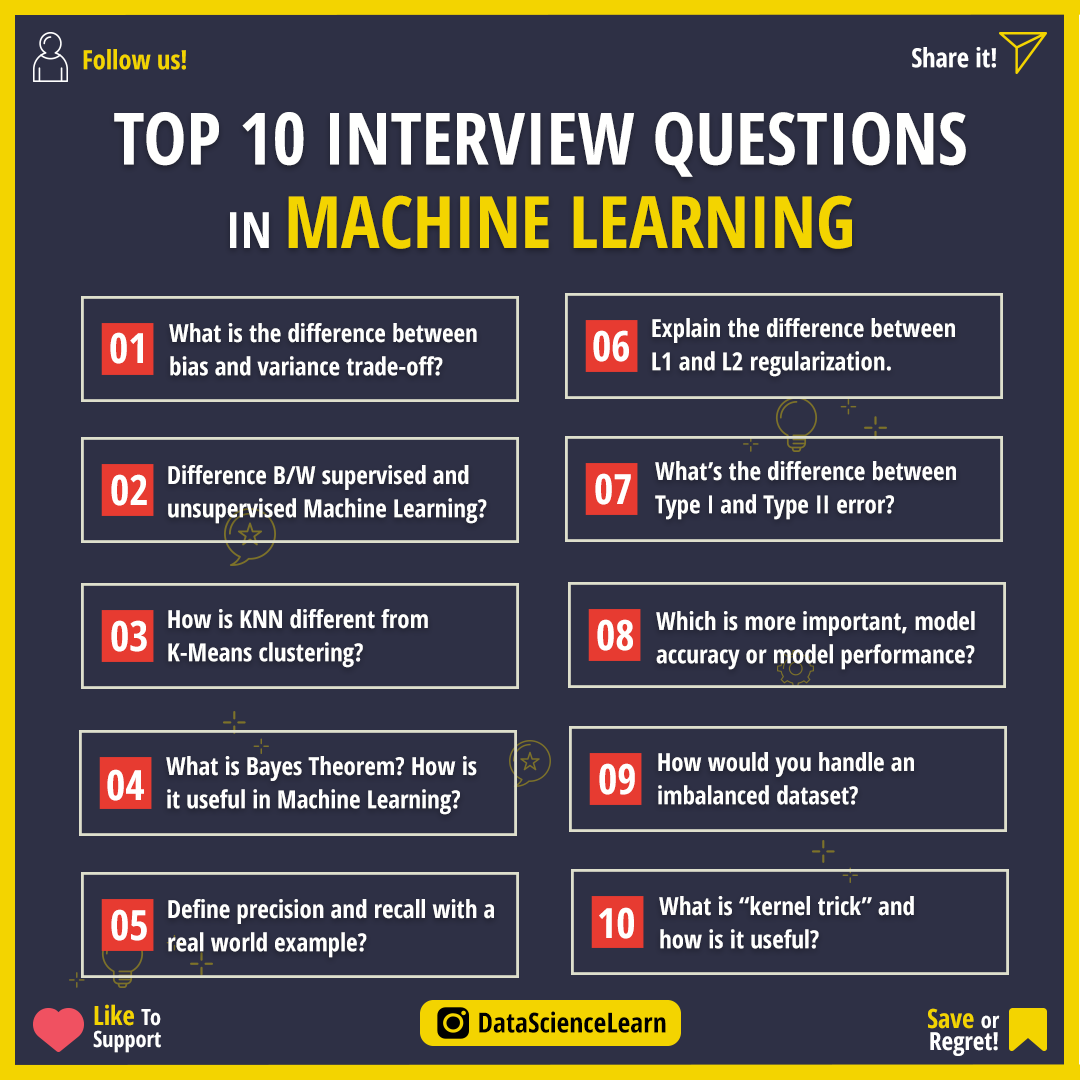
<style>
.page{position:relative;width:1080px;height:1080px;background:#2e3045}
.page>*{position:absolute;margin:0}
.t1{font:26.4px "OpenSans-CondensedBold";color:#f3d400}
.t2{font:26.4px "OpenSans-CondensedBold";color:#ffffff}
.t3{font:72.2px/72.2px "OpenSans-CondensedBold";color:#fffffe}
.t4{font:50px/83.3px "OpenSans-CondensedBold";color:#fffffe}
.t5{font:72.2px/83.3px "OpenSans-CondensedBold";color:#f3d400}
.t6{font:25px/33.3px "OpenSans-CondensedBold";color:#fffffe}
.t7{font:41.7px "OpenSans-CondensedBold";color:#fffffe}
.t8{font:22.2px/22.2px "OpenSans-CondensedBold";color:#ffffff}
.t9{font:26.4px/22.2px "OpenSans-CondensedBold";color:#f3d400}
.t10{font:27.8px "OpenSans-CondensedBold";color:#000000}
.t11{font:25px/22.2px "OpenSans-CondensedBold";color:#ffffff}
</style>
<div class="page">
<p class="t1" style="left:83px;top:49px;width:103px;height:21px">Follow us!</p>
<p class="t2" style="left:912px;top:47px;width:84px;height:21px">Share it!</p>
<p class="t3" style="left:114px;top:112px;width:852px;height:137px;text-align:center">TOP 10 INTERVIEW QUESTIONS<br><span class="t4">IN </span><span class="t5">MACHINE LEARNING</span></p>
<p class="t6" style="left:652px;top:318px;width:303px;height:59px">Explain the difference between <br>L1 and L2 regularization.</p>
<p class="t6" style="left:169px;top:323px;width:308px;height:53px">What is the difference between <br>bias and variance trade-off?</p>
<p class="t7" style="left:110px;top:332px;width:33px;height:32px">01</p>
<p class="t7" style="left:593px;top:330px;width:36px;height:32px">06</p>
<p class="t6" style="left:655px;top:461px;width:301px;height:59px">What’s the difference between <br>Type I and Type II error?</p>
<p class="t6" style="left:168px;top:465px;width:319px;height:59px">Difference B/W supervised and <br>unsupervised Machine Learning?</p>
<p class="t7" style="left:595px;top:473px;width:36px;height:32px">07</p>
<p class="t7" style="left:111px;top:474px;width:36px;height:32px">02</p>
<p class="t6" style="left:168px;top:609px;width:260px;height:59px">How is KNN different from <br>K-Means clustering?</p>
<p class="t6" style="left:656px;top:611px;width:319px;height:59px">Which is more important, model <br>accuracy or model performance?</p>
<p class="t7" style="left:111px;top:620px;width:36px;height:32px">03</p>
<p class="t7" style="left:597px;top:619px;width:36px;height:32px">08</p>
<p class="t6" style="left:166px;top:756px;width:311px;height:59px">What is Bayes Theorem? How is <br>it useful in Machine Learning?</p>
<p class="t6" style="left:658px;top:752px;width:256px;height:53px">How would you handle an <br>imbalanced dataset?</p>
<p class="t7" style="left:107px;top:769px;width:37px;height:32px">04</p>
<p class="t7" style="left:599px;top:763px;width:36px;height:32px">09</p>
<p class="t6" style="left:168px;top:899px;width:326px;height:59px">Define precision and recall with a <br>real world example?</p>
<p class="t6" style="left:659px;top:896px;width:255px;height:53px">What is “kernel trick” and <br>how is it useful?</p>
<p class="t7" style="left:111px;top:909px;width:36px;height:32px">05</p>
<p class="t7" style="left:599px;top:907px;width:35px;height:32px">10</p>
<p class="t8" style="left:93px;top:1004px;width:68px;height:49px"><span class="t9">Like </span>To<br>Support</p>
<p class="t10" style="left:479px;top:1011px;width:187px;height:22px">DataScienceLearn</p>
<p class="t11" style="left:928px;top:1008px;width:72px;height:48px;text-align:right"><span class="t9">Save </span><span class="t8">or<br></span>Regret!</p>
</div>
